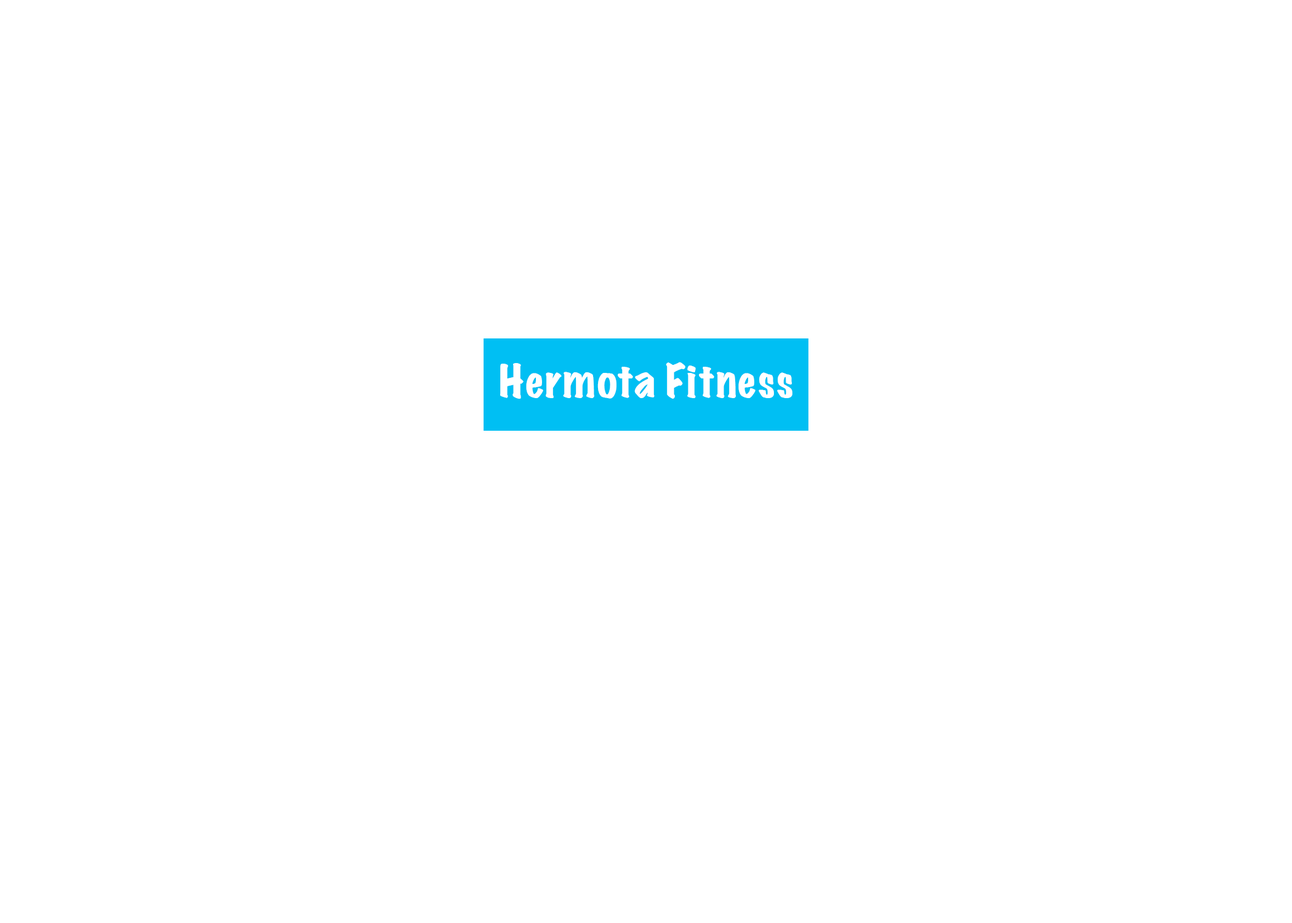
<style>
.page{position:relative;width:1292px;height:923px;background:#ffffff}
.page>*{position:absolute;margin:0}
.t1{font:41px "MarkerFelt-Wide";color:#ffffff}
</style>
<div class="page">
<p class="t1" style="left:500px;top:362px;width:292px;height:37px">Hermota Fitness</p>
</div>
